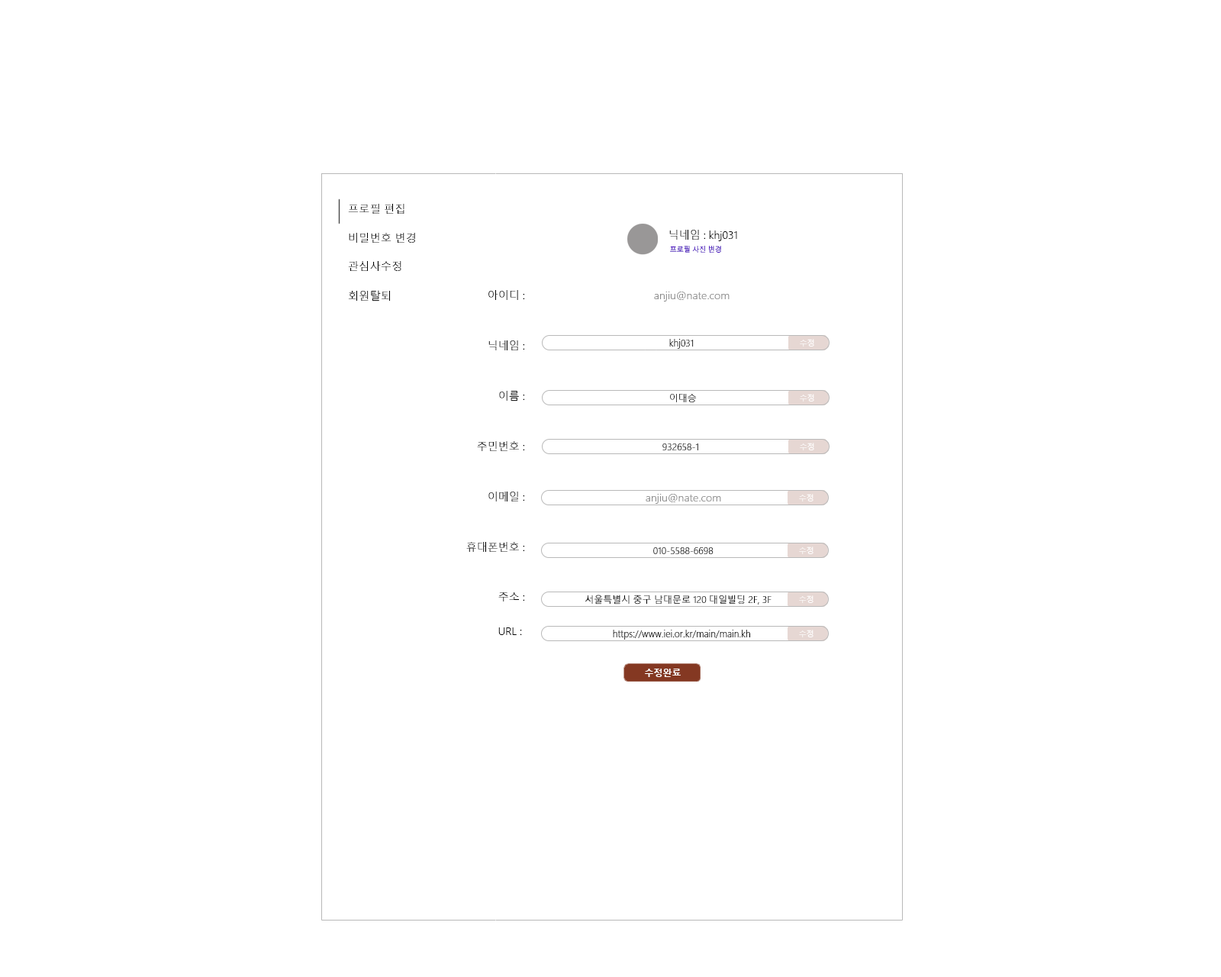
<style>
.page{position:relative;width:1221px;height:977px;background:#ffffff}
.page>*{position:absolute;margin:0}
.t1{font:11px "MalgunGothic-Semilight";color:#000000}
.t2{font:10.7px "MalgunGothic-Semilight";color:#000000}
.t3{font:6.9px "MalgunGothic-Semilight";color:#4200ba}
.t4{font:10.7px "MalgunGothic-Semilight";color:#8c8c8c}
.t5{font:9.2px "MalgunGothic-Semilight";color:#000000}
.t6{font:7.6px "MalgunGothic-Semilight";color:#ffffff}
.t7{font:9.2px "MalgunGothicBold";color:#ffffff}
</style>
<div class="page">
<p class="t1" style="left:348px;top:204px;width:56px;height:10px">프로필 편집</p>
<p class="t1" style="left:349px;top:233px;width:66px;height:10px">비밀번호 변경</p>
<p class="t2" style="left:669px;top:230px;width:68px;height:11px">닉네임 : khj031</p>
<p class="t3" style="left:670px;top:246px;width:51px;height:7px">프로필 사진 변경</p>
<p class="t1" style="left:348px;top:261px;width:53px;height:10px">관심사수정</p>
<p class="t1" style="left:348px;top:290px;width:42px;height:11px">회원탈퇴</p>
<p class="t2" style="left:488px;top:290px;width:37px;height:10px">아이디 :</p>
<p class="t4" style="left:654px;top:291px;width:75px;height:10px">anjiu@nate.com</p>
<p class="t2" style="left:488px;top:340px;width:37px;height:10px">닉네임 :</p>
<p class="t5" style="left:669px;top:339px;width:25px;height:10px">khj031</p>
<p class="t6" style="left:800px;top:339px;width:14px;height:7px">수정</p>
<p class="t2" style="left:499px;top:391px;width:26px;height:10px">이름 :</p>
<p class="t5" style="left:670px;top:393px;width:27px;height:10px">이대승</p>
<p class="t6" style="left:800px;top:394px;width:14px;height:7px">수정</p>
<p class="t2" style="left:477px;top:441px;width:48px;height:10px">주민번호 :</p>
<p class="t5" style="left:662px;top:443px;width:36px;height:7px">932658-1</p>
<p class="t6" style="left:800px;top:443px;width:14px;height:7px">수정</p>
<p class="t2" style="left:488px;top:491px;width:37px;height:10px">이메일 :</p>
<p class="t4" style="left:646px;top:494px;width:75px;height:10px">anjiu@nate.com</p>
<p class="t6" style="left:799px;top:494px;width:14px;height:7px">수정</p>
<p class="t2" style="left:466px;top:542px;width:59px;height:10px">휴대폰번호 :</p>
<p class="t5" style="left:653px;top:547px;width:60px;height:7px">010-5588-6698</p>
<p class="t6" style="left:799px;top:546px;width:14px;height:8px">수정</p>
<p class="t2" style="left:498px;top:592px;width:27px;height:9px">주소 :</p>
<p class="t5" style="left:585px;top:594px;width:186px;height:10px">서울특별시 중구 남대문로 120 대일빌딩 2F, 3F</p>
<p class="t6" style="left:799px;top:595px;width:14px;height:8px">수정</p>
<p class="t2" style="left:498px;top:627px;width:24px;height:8px">URL :</p>
<p class="t5" style="left:613px;top:630px;width:137px;height:9px">https://www.iei.or.kr/main/main.kh</p>
<p class="t6" style="left:799px;top:630px;width:14px;height:7px">수정</p>
<p class="t7" style="left:645px;top:668px;width:36px;height:9px">수정완료</p>
</div>
